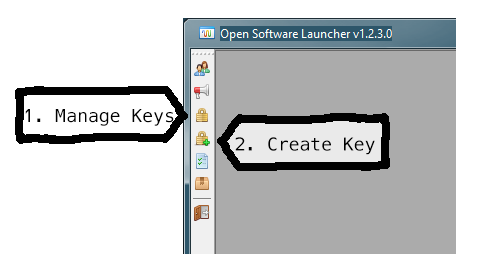
<style>
.page{position:relative;width:478px;height:280px;background:#ffffff}
.page>*{position:absolute;margin:0}
.t1{font:18px "Mensch-Regular";color:#000000}
</style>
<div class="page">
<p class="t1" style="left:25px;top:109px;width:149px;height:17px">1. Manage Keys</p>
<p class="t1" style="left:235px;top:137px;width:140px;height:18px">2. Create Key</p>
</div>
